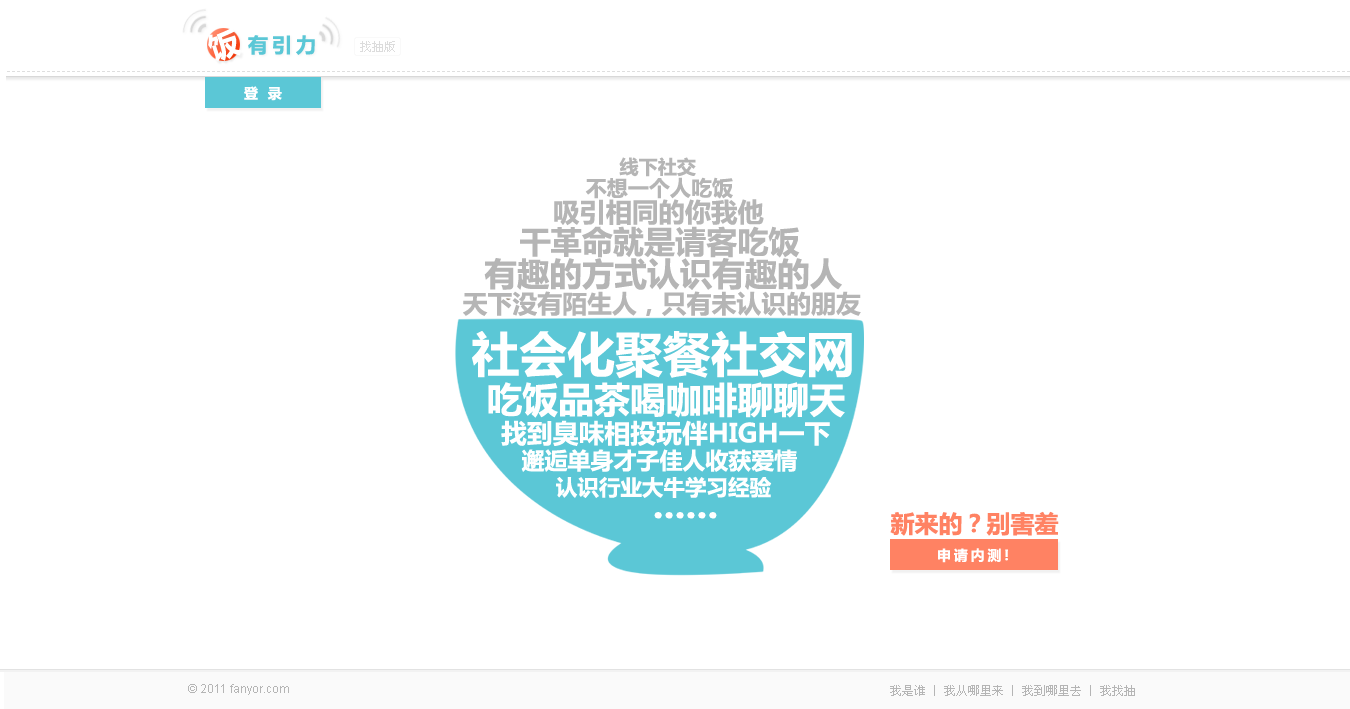
<style>
.page{position:relative;width:1350px;height:709px;background:#ffffff}
.page>*{position:absolute;margin:0}
.t1{font:30px "MicrosoftYaHei";letter-spacing:0.2em;color:#ffffff}
.t2{font:20px "MicrosoftYaHei";letter-spacing:0.2em;color:#5bc7d6}
.t3{font:12px "SimSun";color:#dcdcdc}
.t4{font:14px "MicrosoftYaHei";letter-spacing:0.2em;color:#ffffff}
.t5{font:19.1px "MicrosoftYaHei";color:#b5b5b5}
.t6{font:34.5px "MicrosoftYaHei";color:#5bc7d6}
.t7{font:21.1px "MicrosoftYaHei";color:#b5b5b5}
.t8{font:26.3px "MicrosoftYaHei";color:#b5b5b5}
.t9{font:31.1px "MicrosoftYaHei";color:#b5b5b5}
.t10{font:32.5px "MicrosoftYaHei";color:#b5b5b5}
.t11{font:24.9px "MicrosoftYaHei";color:#b5b5b5}
.t12{font:47.9px "MicrosoftYaHei";color:#ffffff}
.t13{font:35.9px "MicrosoftYaHei";color:#ffffff}
.t14{font:25.8px/25.3px "MicrosoftYaHei";color:#ffffff}
.t15{font:34.5px/25.3px "MicrosoftYaHei";color:#5bc7d6}
.t16{font:23px/26.3px "MicrosoftYaHei";color:#ffffff}
.t17{font:21.5px/26.3px "MicrosoftYaHei";color:#ffffff}
.t18{font:38.3px/23px "MicrosoftYaHei";color:#ffffff}
.t19{font:24px "MicrosoftYaHei";color:#ff8263}
.t20{font:12px "ArialMT";color:#b5b5b5}
.t21{font:12px "SimSun";color:#b5b5b5}
</style>
<div class="page">
<p class="t1" style="left:208px;top:28px;width:33px;height:34px;rotate:-18deg">饭</p>
<p class="t2" style="left:248px;top:35px;width:67px;height:20px">有引力</p>
<p class="t3" style="left:360px;top:41px;width:35px;height:11px">找抽版</p>
<p class="t4" style="left:244px;top:86px;width:38px;height:15px">登 录</p>
<p class="t5" style="left:619px;top:157px;width:77px;height:20px"><span class="t6"><br></span>线下社交</p>
<p class="t7" style="left:585px;top:177px;width:148px;height:22px"><span class="t6"><br></span>不想一个人吃饭</p>
<p class="t8" style="left:554px;top:199px;width:210px;height:27px"><span class="t6"><br></span>吸引相同的你我他</p>
<p class="t9" style="left:520px;top:226px;width:280px;height:32px"><span class="t6"><br></span>干革命就是请客吃饭</p>
<p class="t10" style="left:484px;top:258px;width:358px;height:32px"><span class="t6"><br></span>有趣的方式认识有趣的人</p>
<p class="t11" style="left:463px;top:291px;width:398px;height:25px"><span class="t6"><br></span>天下没有陌生人，只有未认识的朋友</p>
<p class="t12" style="left:472px;top:331px;width:380px;height:48px"><span class="t6"><br></span>社会化聚餐社交网</p>
<p class="t13" style="left:488px;top:382px;width:357px;height:36px"><span class="t6"><br></span>吃饭品茶喝咖啡聊聊天</p>
<p class="t14" style="left:501px;top:420px;width:329px;height:99px"><span class="t15"><br></span>找到臭味相投玩伴HIGH一下<br><span class="t16">   邂逅单身才子佳人收获爱情<br>        </span><span class="t17">认识行业大牛学习经验<br>                   </span><span class="t18">......</span></p>
<p class="t19" style="left:890px;top:511px;width:169px;height:25px">新来的？别害羞</p>
<p class="t4" style="left:938px;top:548px;width:70px;height:15px">申请内测!</p>
<p class="t20" style="left:188px;top:684px;width:101px;height:11px">© 2011 fanyor.com</p>
<p class="t21" style="left:890px;top:685px;width:245px;height:11px">我是谁   我从哪里来   我到哪里去   我找抽</p>
</div>
